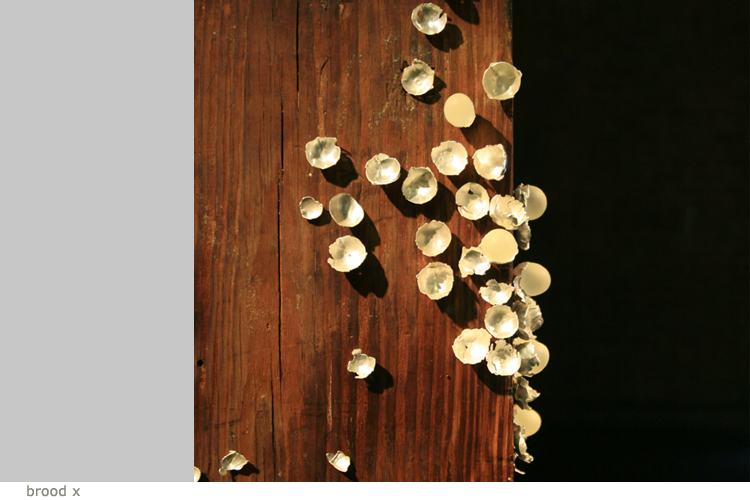
<style>
.page{position:relative;width:750px;height:500px;background:#c8c7c7}
.page>*{position:absolute;margin:0}
.t1{font:14px "Verdana";letter-spacing:0.01em;color:#898a7d}
</style>
<div class="page">
<p class="t1" style="left:27px;top:485px;width:54px;height:12px">brood x</p>
</div>
